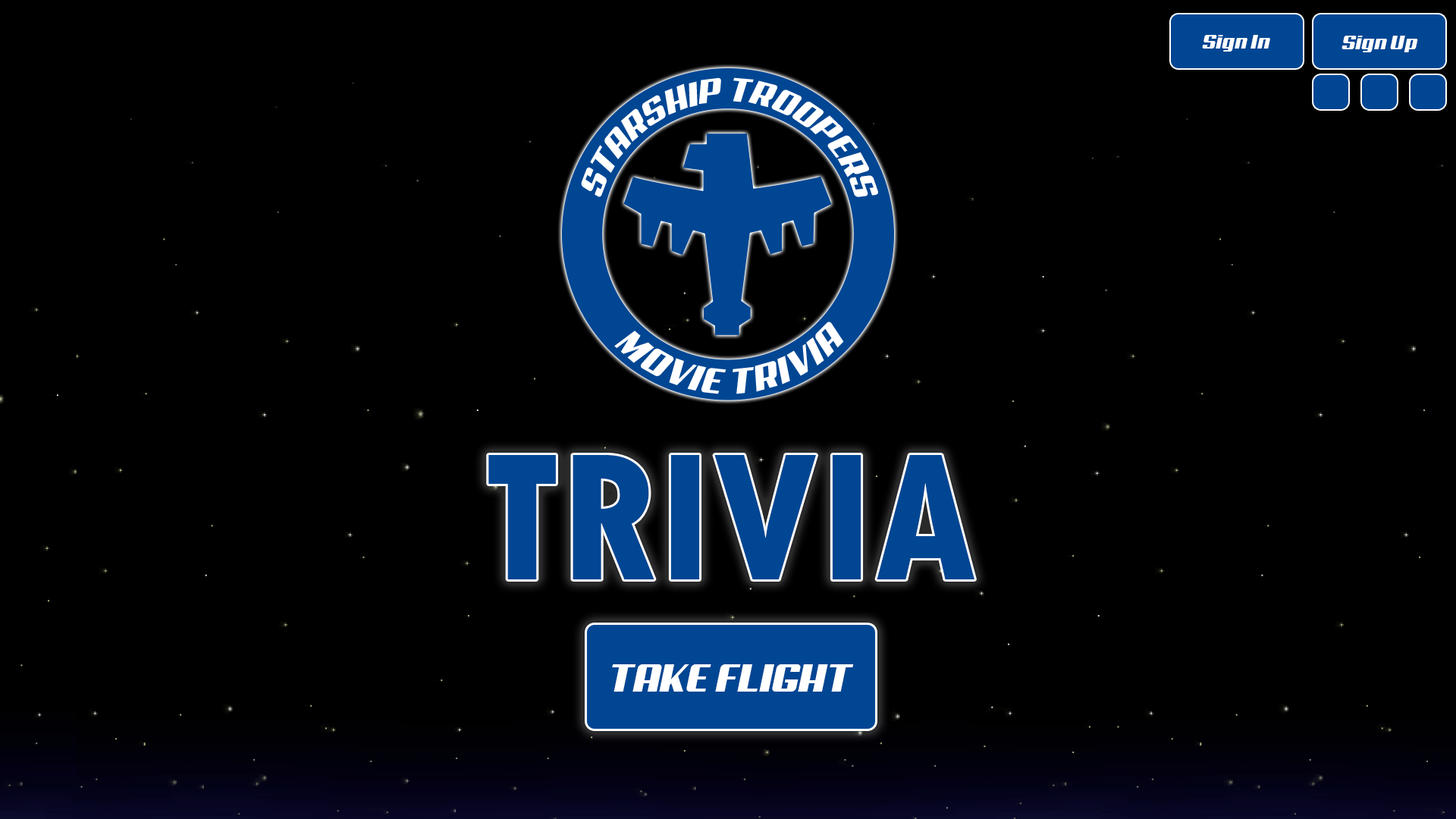
<style>
.page{position:relative;width:1456px;height:819px;background:#000000}
.page>*{position:absolute;margin:0}
.t1{font:20px "Aero";color:#ffffff}
.t2{font:190px "TwCenMT-CondensedExtraBold";color:#004693}
.t3{font:39.1px "Aero";color:#ffffff}
</style>
<div class="page">
<p class="t1" style="left:1202px;top:35px;width:68px;height:17px">Sign In</p>
<p class="t1" style="left:1341px;top:36px;width:77px;height:16px">Sign Up</p>
<p class="t2" style="left:488px;top:455px;width:486px;height:124px">TRIVIA</p>
<p class="t3" style="left:612px;top:664px;width:242px;height:28px">TAKE FLIGHT</p>
</div>
